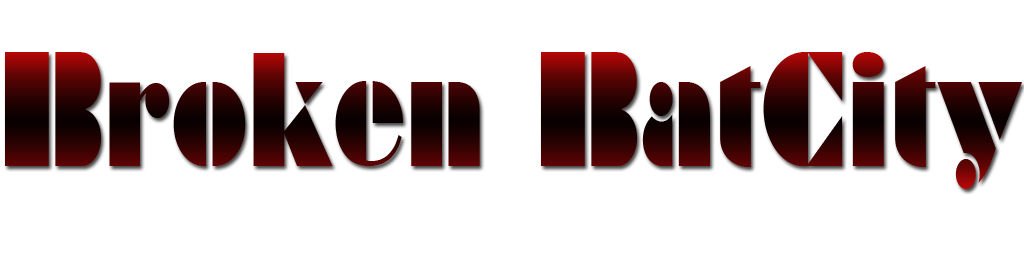
<style>
.page{position:relative;width:1024px;height:256px;background:#ffffff}
.page>*{position:absolute;margin:0}
.t1{font:148.1px "Braggadocio";scale:0.67 1}
</style>
<div class="page">
<p class="t1" style="left:5px;top:52px;width:1017px;height:137px">Broken BatCity</p>
</div>
